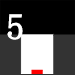
<style>
.page{position:relative;width:75px;height:75px;background:#000000}
.page>*{position:absolute;margin:0}
.t1{font:36px "FangSong";color:#ffffff;font-weight:bold}
</style>
<div class="page">
<p class="t1" style="left:7px;top:14px;width:16px;height:26px">5</p>
</div>
